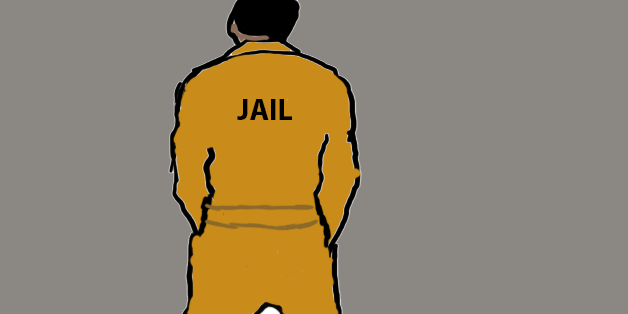
<style>
.page{position:relative;width:628px;height:314px;background:#8b8884}
.page>*{position:absolute;margin:0}
.t1{font:30px "MyriadPro-Bold";color:#000000}
</style>
<div class="page">
<p class="t1" style="left:237px;top:99px;width:55px;height:21px">JAIL</p>
</div>
